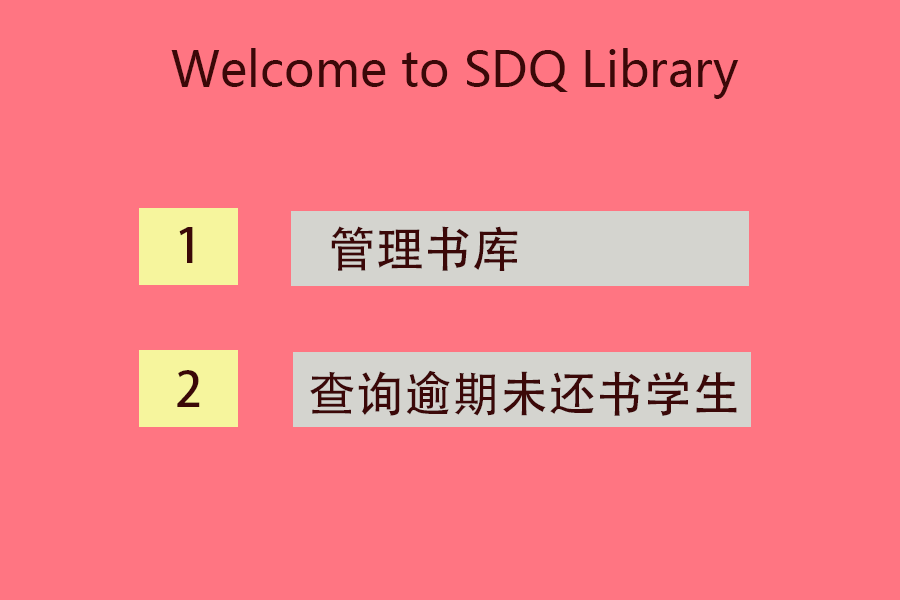
<style>
.page{position:relative;width:900px;height:600px;background:#ff7582}
.page>*{position:absolute;margin:0}
.t1{font:48px "MicrosoftYaHeiUI";color:#3b0808}
.t2{font:48px "AdobeHeitiStd-Regular";color:#3b0808}
</style>
<div class="page">
<p class="t1" style="left:171px;top:48px;width:568px;height:51px">Welcome to SDQ Library</p>
<p class="t2" style="left:179px;top:227px;width:14px;height:36px">1</p>
<p class="t2" style="left:331px;top:226px;width:187px;height:45px">管理书库</p>
<p class="t2" style="left:177px;top:370px;width:23px;height:37px">2</p>
<p class="t2" style="left:310px;top:370px;width:427px;height:46px">查询逾期未还书学生</p>
</div>
